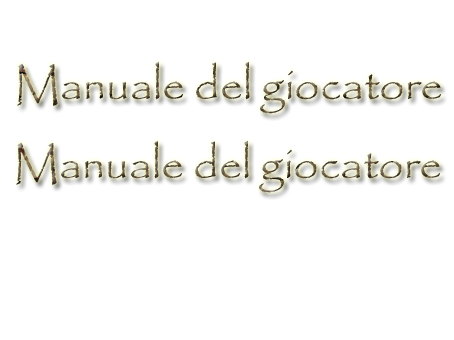
<style>
.page{position:relative;width:454px;height:340px;background:#ffffff}
.page>*{position:absolute;margin:0}
.t1{font:45px "Papyrus-Regular"}
</style>
<div class="page">
<p class="t1" style="left:17px;top:61px;width:424px;height:53px">Manuale del giocatore</p>
</div>
